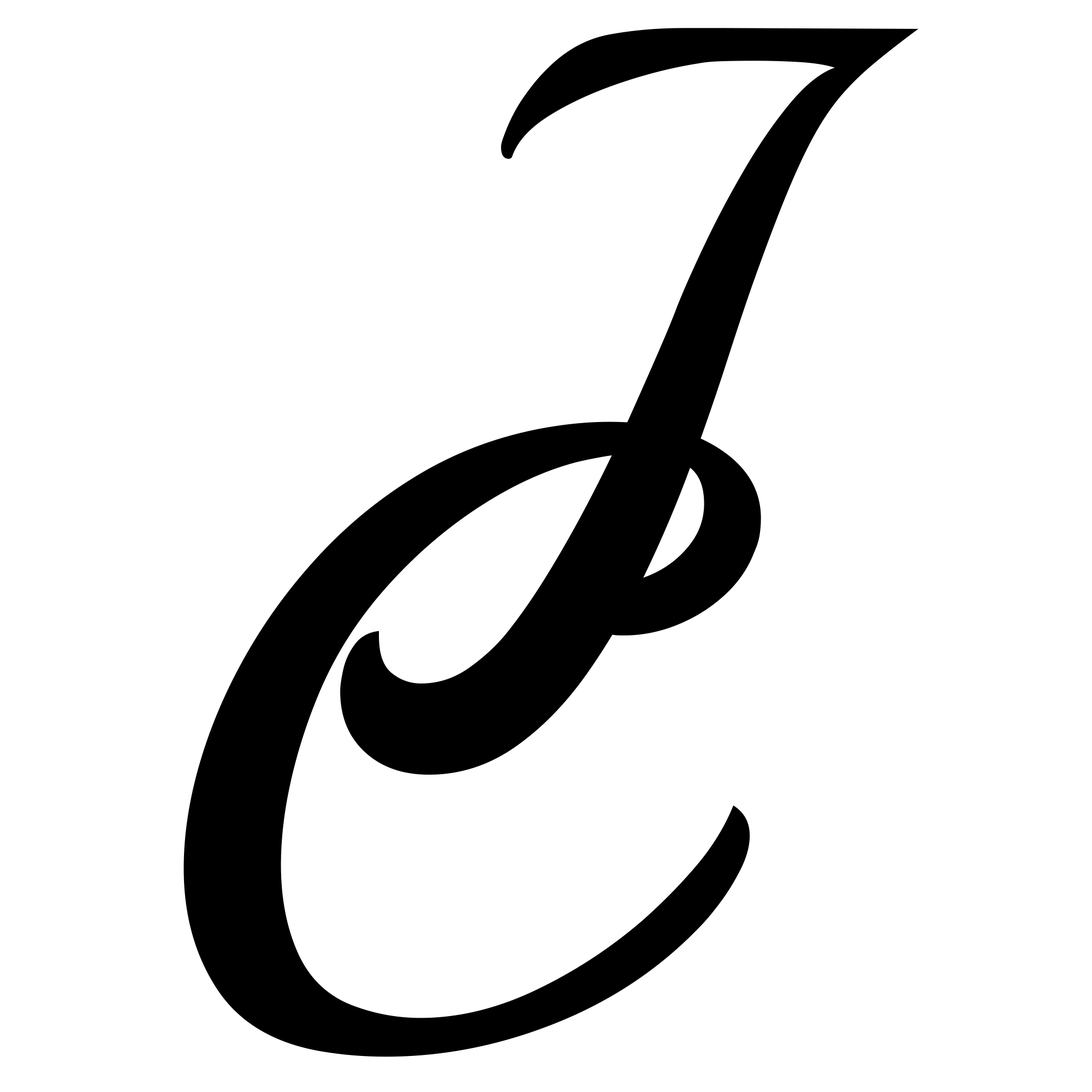
<style>
.page{position:relative;width:1092px;height:1092px;background:#ffffff}
.page>*{position:absolute;margin:0}
.t1{font:860.2px "Playball-Regular";color:#000000}
</style>
<div class="page">
<p class="t1" style="left:340px;top:28px;width:578px;height:747px">J</p>
<p class="t1" style="left:183px;top:422px;width:578px;height:635px">C</p>
</div>
